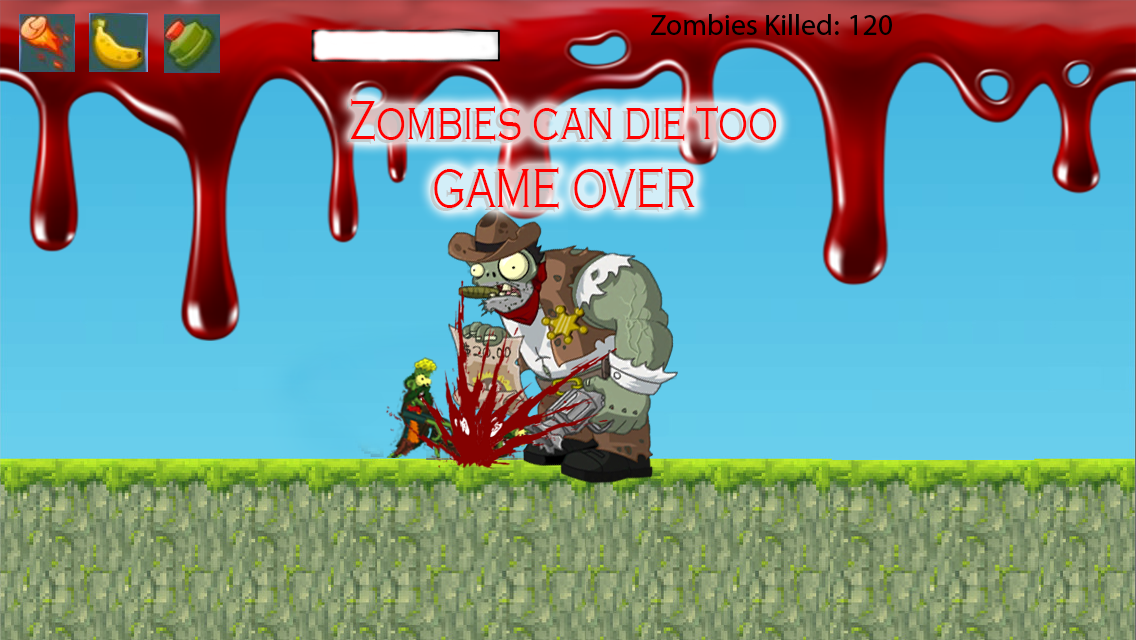
<style>
.page{position:relative;width:1136px;height:640px}
.page>*{position:absolute;margin:0}
.t1{font:29.6px "MyriadHebrew-Regular";color:#000000}
.t2{font:56.5px "CopperplateGothic-Light";color:#ff0000;scale:0.71 1}
</style>
<div class="page">
<p class="t1" style="left:651px;top:14px;width:241px;height:21px">Zombies Killed: 120</p>
<p class="t2" style="left:351px;top:99px;width:426px;height:110px;text-align:center">Zombies can die too<br>GAME OVER</p>
</div>
